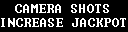
<style>
.page{position:relative;width:128px;height:32px;background:#000000}
.page>*{position:absolute;margin:0}
.t1{font:14px "Terminal";color:#ffffff}
</style>
<div class="page">
<p class="t1" style="left:15px;top:4px;width:94px;height:9px">CAMERA SHOTS</p>
<p class="t1" style="left:1px;top:18px;width:125px;height:9px">INCREASE JACKPOT</p>
</div>
